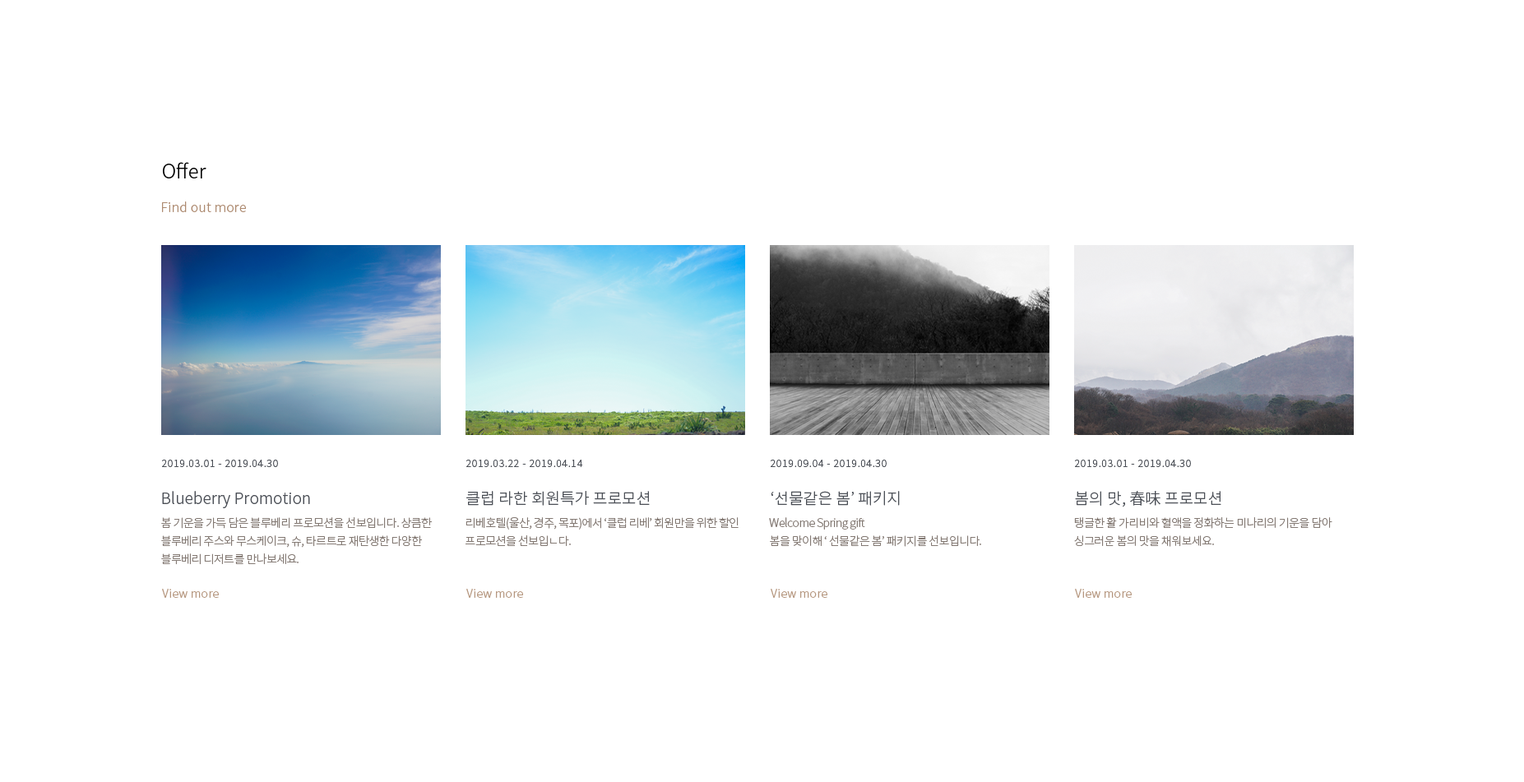
<style>
.page{position:relative;width:1524px;height:782px;background:#ffffff}
.page>*{position:absolute;margin:0}
.t1{font:19.7px "NotoSansKR-Light";color:#000000}
.t2{font:13.2px "NotoSansKR-Light";letter-spacing:0.01em;color:#ad8a70}
.t3{font:10.3px "NotoSansKR-Light";letter-spacing:0.045em;color:#4c5057}
.t4{font:15.6px "NotoSansKR-Light";letter-spacing:0.008em;color:#4c5057}
.t5{font:11.5px/18.1px "NotoSansKR-Light";letter-spacing:-0.04em;color:#847a74}
.t6{font:11.5px "NotoSansKR-Light";letter-spacing:0.02em;color:#b5967e}
</style>
<div class="page">
<p class="t1" style="left:163px;top:162px;width:43px;height:17px">Offer</p>
<p class="t2" style="left:162px;top:202px;width:84px;height:10px">Find out more</p>
<p class="t3" style="left:162px;top:460px;width:116px;height:7px">2019.03.01 - 2019.04.30</p>
<p class="t3" style="left:466px;top:460px;width:117px;height:7px">2019.03.22 - 2019.04.14</p>
<p class="t3" style="left:771px;top:460px;width:116px;height:7px">2019.09.04 - 2019.04.30</p>
<p class="t3" style="left:1075px;top:460px;width:116px;height:7px">2019.03.01 - 2019.04.30</p>
<p class="t4" style="left:162px;top:491px;width:148px;height:17px">Blueberry Promotion</p>
<p class="t4" style="left:466px;top:491px;width:184px;height:15px">클럽 라한 회원특가 프로모션</p>
<p class="t4" style="left:771px;top:491px;width:129px;height:15px">‘선물같은 봄’ 패키지</p>
<p class="t4" style="left:1075px;top:491px;width:147px;height:17px">봄의 맛, 春味 프로모션</p>
<p class="t5" style="left:161px;top:517px;width:271px;height:48px">봄 기운을 가득 담은 블루베리 프로모션을 선보입니다. 상큼한<br>블루베리 주스와 무스케이크, 슈, 타르트로 재탄생한 다양한<br>블루베리 디저트를 만나보세요.</p>
<p class="t5" style="left:466px;top:517px;width:273px;height:29px">리베호텔(울산, 경주, 목포)에서 ‘클럽 리베’ 회원만을 위한 할인<br>프로모션을 선보입ㄴ다.</p>
<p class="t5" style="left:769px;top:517px;width:212px;height:30px">Welcome Spring gift<br>봄을 맞이해 ‘ 선물같은 봄’ 패키지를 선보입니다.</p>
<p class="t5" style="left:1074px;top:517px;width:259px;height:30px">탱글한 활 가리비와 혈액을 정화하는 미나리의 기운을 담아<br>싱그러운 봄의 맛을 채워보세요.</p>
<p class="t6" style="left:162px;top:589px;width:57px;height:9px">View more</p>
<p class="t6" style="left:466px;top:589px;width:57px;height:9px">View more</p>
<p class="t6" style="left:771px;top:589px;width:57px;height:9px">View more</p>
<p class="t6" style="left:1075px;top:589px;width:57px;height:9px">View more</p>
</div>
